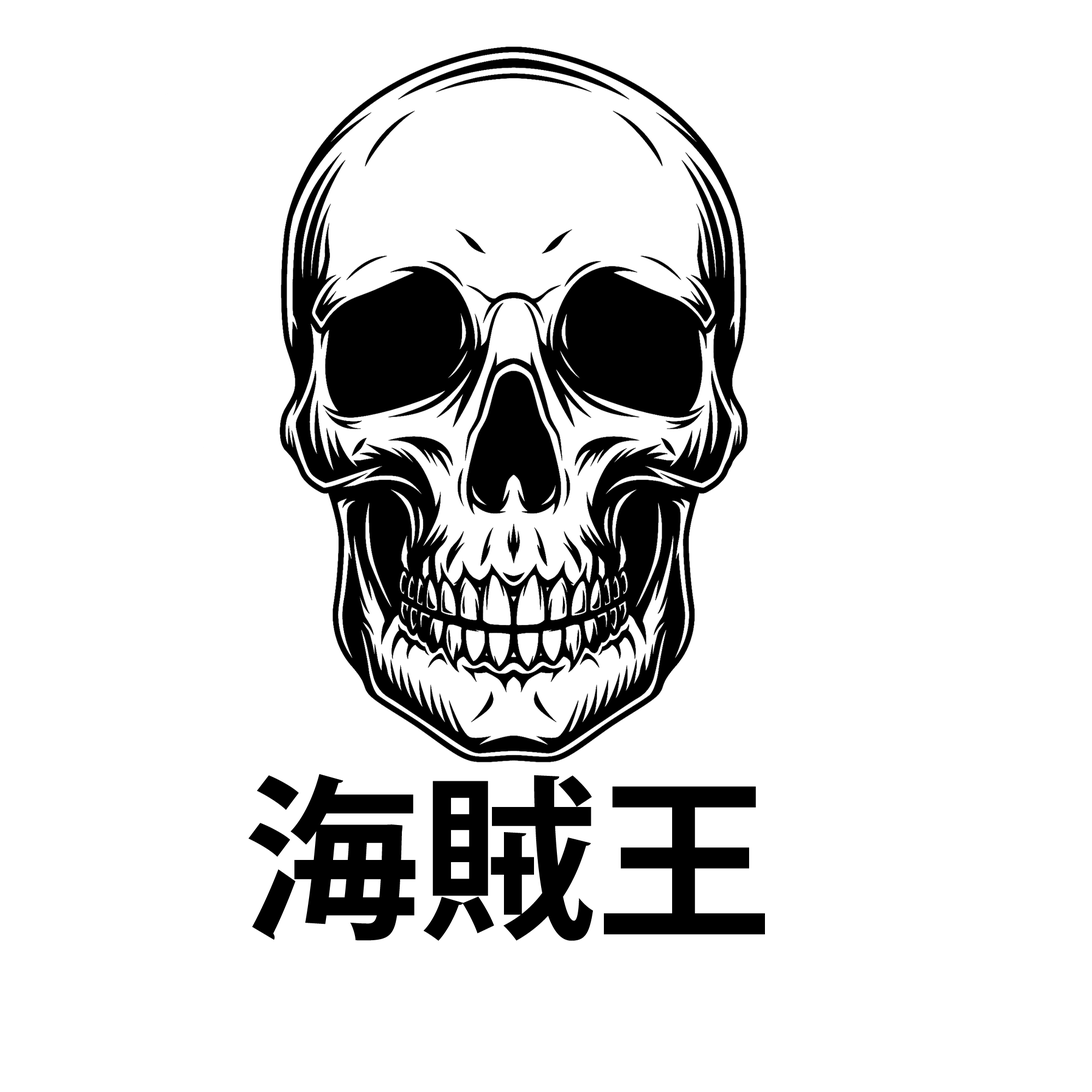
<style>
.page{position:relative;width:1092px;height:1092px;background:#ffffff}
.page>*{position:absolute;margin:0}
.t1{font:176.1px "KozGoPr6N-Bold";color:#000000}
</style>
<div class="page">
<p class="t1" style="left:248px;top:774px;width:517px;height:167px">海賊王</p>
</div>
